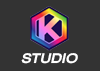
<style>
.page{position:relative;width:100px;height:71px;background:#333333}
.page>*{position:absolute;margin:0}
.t1{font:21.1px "DBHelvethaicaX-74BdExtIt";color:#ffffff}
</style>
<div class="page">
<p class="t1" style="left:21px;top:53px;width:57px;height:11px">STUDIO</p>
</div>
